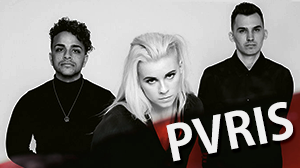
<style>
.page{position:relative;width:300px;height:168px}
.page>*{position:absolute;margin:0}
.t1{font:47.9px "AdobeGothicStd-Bold";color:#e7e7e7}
</style>
<div class="page">
<p class="t1" style="left:166px;top:102px;width:128px;height:60px;rotate:-11deg">PVRIS</p>
</div>
